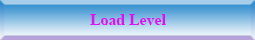
<style>
.page{position:relative;width:255px;height:40px}
.page>*{position:absolute;margin:0}
.t1{font:15.8px "TimesNewRomanPS-BoldMT";color:#d815ed}
</style>
<div class="page">
<p class="t1" style="left:90px;top:14px;width:76px;height:11px">Load Level</p>
</div>
